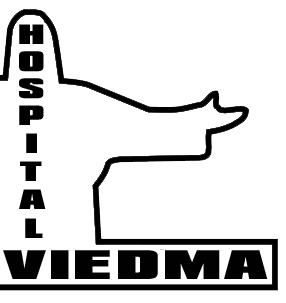
<style>
.page{position:relative;width:286px;height:303px;background:#ffffff}
.page>*{position:absolute;margin:0}
.t1{font:24px "Padaloma";letter-spacing:0.075em;color:#000000}
.t2{font:35.5px "Padaloma";letter-spacing:0.075em;color:#010101;scale:1.11 1}
</style>
<div class="page">
<p class="t1" style="left:19px;top:24px;width:25px;height:20px">H</p>
<p class="t1" style="left:19px;top:51px;width:25px;height:21px">O</p>
<p class="t1" style="left:19px;top:78px;width:25px;height:21px">S</p>
<p class="t1" style="left:19px;top:105px;width:25px;height:20px">P</p>
<p class="t1" style="left:26px;top:133px;width:11px;height:20px">I</p>
<p class="t1" style="left:20px;top:161px;width:22px;height:20px">T</p>
<p class="t1" style="left:19px;top:189px;width:27px;height:20px">A</p>
<p class="t1" style="left:25px;top:218px;width:18px;height:20px">L</p>
<p class="t2" style="left:3px;top:250px;width:265px;height:29px">VIEDMA</p>
</div>
